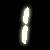
<style>
.page{position:relative;width:50px;height:50px;background:#000000}
.page>*{position:absolute;margin:0}
.t1{font:55px "LiquidCrystal";color:#ffffff}
</style>
<div class="page">
<p class="t1" style="left:22px;top:7px;width:7px;height:37px">1</p>
</div>
